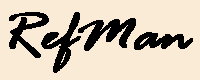
<style>
.page{position:relative;width:200px;height:80px;background:#faebd7}
.page>*{position:absolute;margin:0}
.t1{font:60px "RageItalic";color:#000000;font-weight:bold}
</style>
<div class="page">
<p class="t1" style="left:9px;top:12px;width:184px;height:61px">RefMan</p>
</div>
